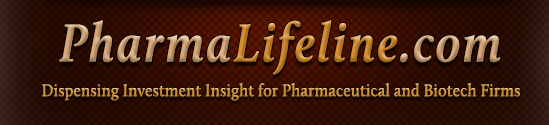
<style>
.page{position:relative;width:549px;height:125px}
.page>*{position:absolute;margin:0}
.t1{font:55.2px "Calluna-BoldIt";letter-spacing:0.05em;scale:0.88 1}
.t2{font:17.6px "Calluna-Semibold";letter-spacing:0.01em;color:#d5973c;scale:0.91 1}
</style>
<div class="page">
<p class="t1" style="left:59px;top:20px;width:441px;height:55px">PharmaLifeline.com</p>
<p class="t2" style="left:42px;top:83px;width:478px;height:18px">Dispensing Investment Insight for Pharmaceutical and Biotech Firms</p>
</div>
